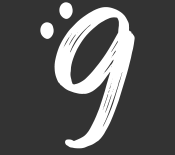
<style>
.page{position:relative;width:175px;height:155px;background:#333333}
.page>*{position:absolute;margin:0}
.t1{font:225px "Smileof-the-Ocean";color:#ffffff}
.t2{font:223px "RolleteQaku-Regular";color:#ffffff}
</style>
<div class="page">
<p class="t1" style="left:40px;top:2px;width:33px;height:37px;rotate:-46deg">..</p>
<p class="t2" style="left:54px;top:7px;width:81px;height:142px">9</p>
</div>
